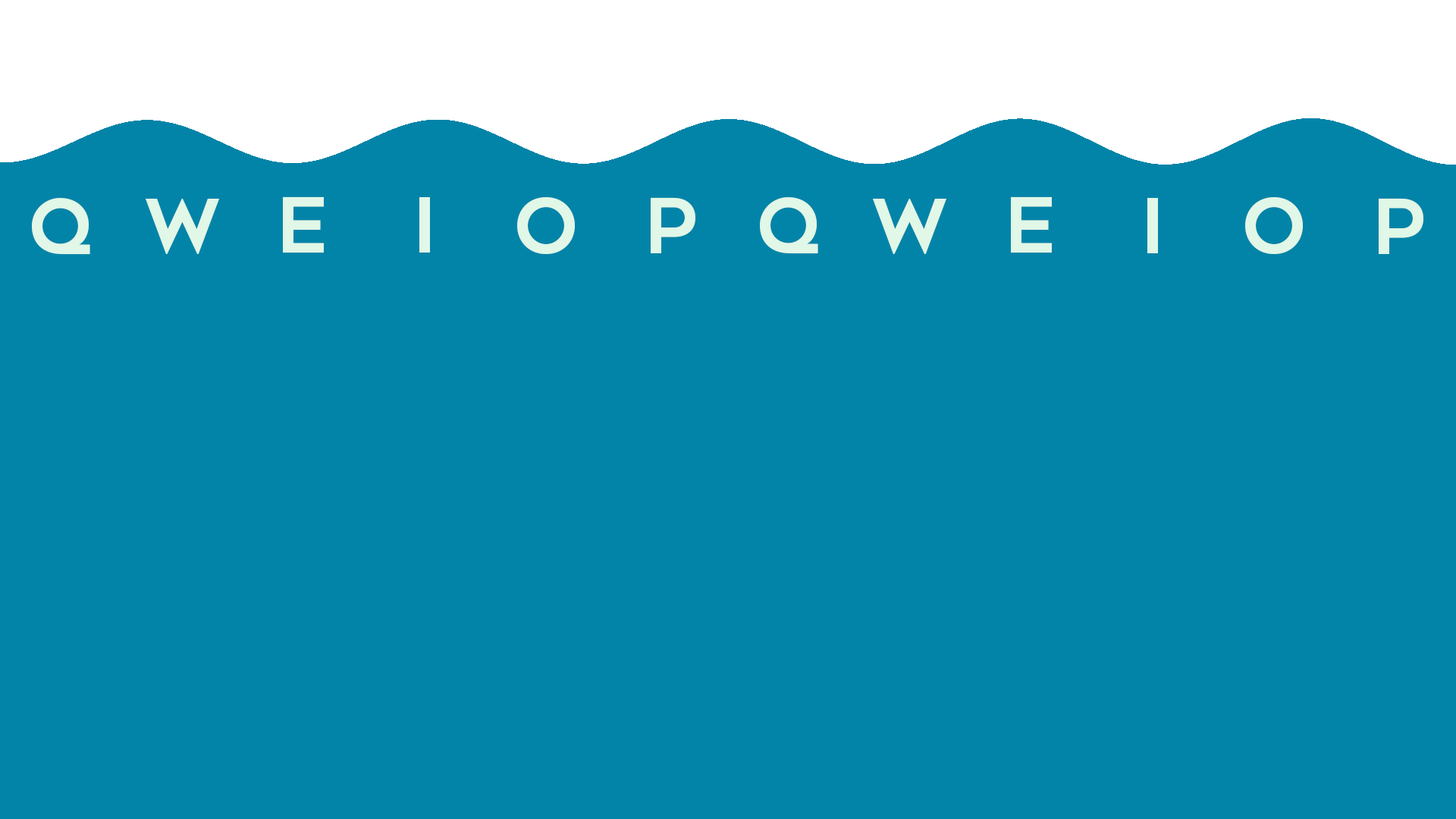
<style>
.page{position:relative;width:1456px;height:819px;background:#0284a8}
.page>*{position:absolute;margin:0}
.t1{font:75.8px "FONTSPRINGDEMO-GeometosNeueBoldRegular";color:#e1f7e7}
</style>
<div class="page">
<p class="t1" style="left:32px;top:198px;width:58px;height:57px">Q</p>
<p class="t1" style="left:283px;top:196px;width:41px;height:57px">E</p>
<p class="t1" style="left:517px;top:197px;width:58px;height:57px">O</p>
<p class="t1" style="left:651px;top:197px;width:44px;height:56px">P</p>
<p class="t1" style="left:760px;top:197px;width:58px;height:57px">Q</p>
<p class="t1" style="left:1011px;top:196px;width:41px;height:57px">E</p>
<p class="t1" style="left:1245px;top:197px;width:58px;height:57px">O</p>
<p class="t1" style="left:1379px;top:198px;width:44px;height:56px">P</p>
<p class="t1" style="left:146px;top:199px;width:73px;height:55px">W</p>
<p class="t1" style="left:873px;top:199px;width:73px;height:55px">W</p>
</div>
